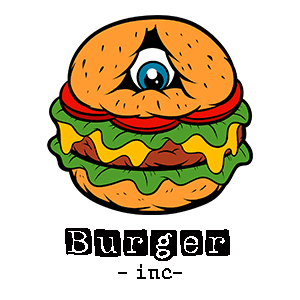
<style>
.page{position:relative;width:300px;height:300px;background:#ffffff}
.page>*{position:absolute;margin:0}
.t1{font:33.3px "BadlyStamped";letter-spacing:0.075em;color:#020000}
.t2{font:21.3px "JMHTypewriter-Bold";color:#020000}
</style>
<div class="page">
<p class="t1" style="left:65px;top:228px;width:165px;height:51px;text-align:center">Burger<br><span class="t2">- inc-</span></p>
</div>
